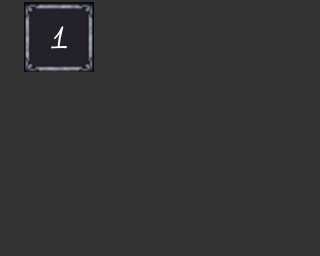
<style>
.page{position:relative;width:320px;height:256px;background:#333333}
.page>*{position:absolute;margin:0}
.t1{font:43px "BadScript-Regular";color:#ffffff}
</style>
<div class="page">
<p class="t1" style="left:51px;top:26px;width:17px;height:23px">1</p>
</div>
